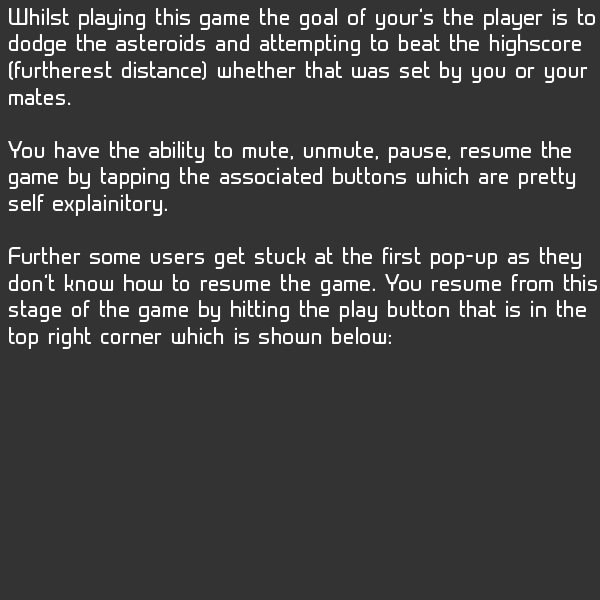
<style>
.page{position:relative;width:600px;height:600px;background:#333333}
.page>*{position:absolute;margin:0}
.t1{font:22.1px "Prime-Regular";color:#ffffff}
</style>
<div class="page">
<p class="t1" style="left:8px;top:8px;width:589px;height:341px">Whilst playing this game the goal of your’s the player is to<br>dodge the asteroids and attempting to beat the highscore <br>(furtherest distance) whether that was set by you or your <br>mates.<br><br>You have the ability to mute, unmute, pause, resume the <br>game by tapping the associated buttons which are pretty <br>self explainitory.<br><br>Further some users get stuck at the first pop-up as they <br>don’t know how to resume the game. You resume from this<br>stage of the game by hitting the play button that is in the <br>top right corner which is shown below:</p>
</div>
